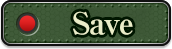
<style>
.page{position:relative;width:172px;height:49px}
.page>*{position:absolute;margin:0}
.t1{font:30px "RyuminPro-ExBold";letter-spacing:-0.04em;color:#eaedc8}
</style>
<div class="page">
<p class="t1" style="left:73px;top:11px;width:60px;height:24px">Save</p>
</div>
